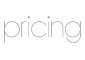
<style>
.page{position:relative;width:85px;height:60px;background:#ffffff}
.page>*{position:absolute;margin:0}
.t1{font:20.8px "BondoluoPeek";color:#9a9a9a}
</style>
<div class="page">
<p class="t1" style="left:4px;top:16px;width:77px;height:27px">Pricing</p>
</div>
